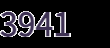
<style>
.page{position:relative;width:110px;height:48px;background:#000000}
.page>*{position:absolute;margin:0}
.t1{font:32px "WebPSD-18463539-0-Regular";color:#3f3254;font-weight:bold}
</style>
<div class="page">
<p class="t1" style="left:0px;top:0px;width:110px;height:48px">3941</p>
</div>
